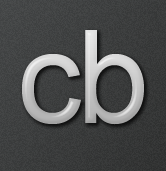
<style>
.page{position:relative;width:166px;height:171px}
.page>*{position:absolute;margin:0}
.t1{font:130px "ArialMT";letter-spacing:-0.04em;color:#c8c8c8}
</style>
<div class="page">
<p class="t1" style="left:22px;top:30px;width:122px;height:95px">cb</p>
</div>
